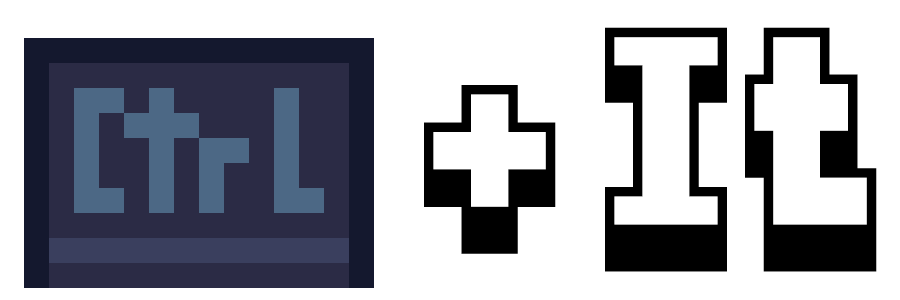
<style>
.page{position:relative;width:900px;height:300px;background:#ffffff}
.page>*{position:absolute;margin:0}
.t1{font:75px "Lysi";color:#000000}
</style>
<div class="page">
<p class="t1" style="left:605px;top:27px;width:272px;height:245px">It</p>
<p class="t1" style="left:424px;top:85px;width:132px;height:169px">+</p>
</div>
